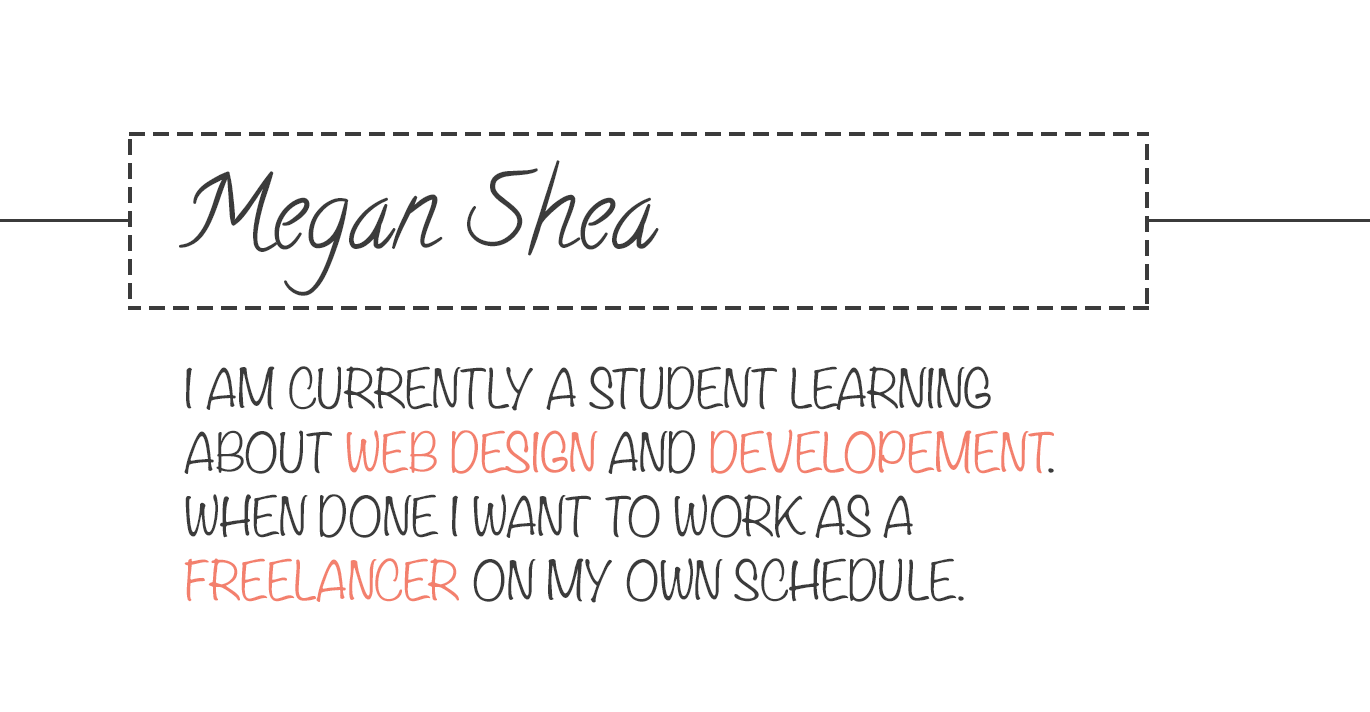
<style>
.page{position:relative;width:1370px;height:712px;background:#ffffff}
.page>*{position:absolute;margin:0}
.t1{font:100px "Calligraffiti";color:#3b3b3b}
.t2{font:48px/64px "Noteworthy-Light";letter-spacing:-0.01em;color:#3b3b3b;text-transform:uppercase}
.t3{font:48px/64px "Noteworthy-Light";letter-spacing:-0.01em;color:#f3806d;text-transform:uppercase}
</style>
<div class="page">
<p class="t1" style="left:179px;top:160px;width:480px;height:136px">Megan Shea</p>
<p class="t2" style="left:184px;top:366px;width:870px;height:237px">I am currently a student learning about <span class="t3">web design</span> and <span class="t3">developement</span>. When done i want to work as a <span class="t3">freelancer </span>on my own schedule.</p>
</div>
